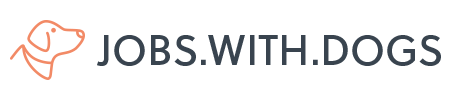
<style>
.page{position:relative;width:460px;height:100px;background:#ffffff}
.page>*{position:absolute;margin:0}
.t1{font:41.7px "SoleilBk";color:#39444f}
</style>
<div class="page">
<p class="t1" style="left:97px;top:35px;width:344px;height:31px">JOBS.WITH.DOGS</p>
</div>
